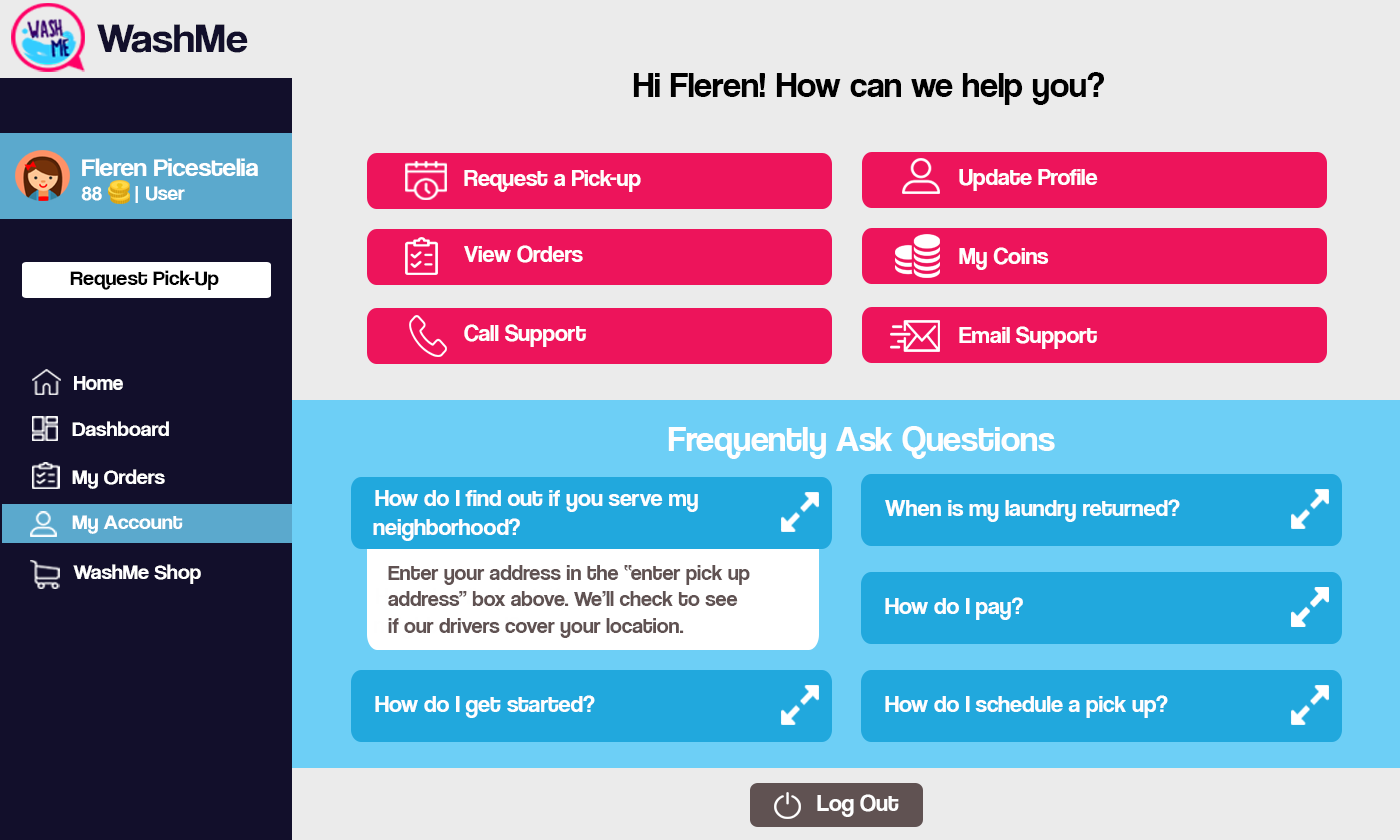
<style>
.page{position:relative;width:1400px;height:840px;background:#ebebeb}
.page>*{position:absolute;margin:0}
.t1{font:42.1px "CoolveticaRg-Regular";color:#120f2b;scale:1.05 1}
.t2{font:36px "CoolveticaRg-Regular";color:#000000}
.t3{font:25.2px "CoolveticaRg-Regular";color:#ffffff;scale:1.05 1}
.t4{font:20px "CoolveticaRg-Regular";color:#ffffff;scale:1.05 1}
.t5{font:24px "CoolveticaRg-Regular";color:#fefefe}
.t6{font:21px "CoolveticaRg-Regular";color:#000000;scale:1.05 1}
.t7{font:21px "CoolveticaRg-Regular";color:#ffffff}
.t8{font:21px "CoolveticaRg-Regular";color:#ffffff;scale:1.05 1}
.t9{font:36px "CoolveticaRg-Regular";color:#fefefe}
.t10{font:22px "CoolveticaRg-Regular";color:#605252}
</style>
<div class="page">
<p class="t1" style="left:97px;top:24px;width:151px;height:29px">WashMe</p>
<p class="t2" style="left:633px;top:72px;width:471px;height:33px">Hi Fleren! How can we help you?</p>
<p class="t3" style="left:81px;top:158px;width:177px;height:45px">Fleren Picestelia<br><span class="t4">88      | User</span></p>
<p class="t5" style="left:464px;top:170px;width:177px;height:22px">Request a Pick-up</p>
<p class="t5" style="left:959px;top:169px;width:139px;height:22px">Update Profile</p>
<p class="t5" style="left:464px;top:245px;width:119px;height:18px">View Orders</p>
<p class="t5" style="left:959px;top:247px;width:90px;height:23px">My Coins</p>
<p class="t6" style="left:70px;top:270px;width:149px;height:20px">Request Pick-Up</p>
<p class="t5" style="left:464px;top:324px;width:122px;height:23px">Call Support</p>
<p class="t5" style="left:959px;top:326px;width:138px;height:23px">Email Support</p>
<p class="t7" style="left:74px;top:376px;width:49px;height:14px">Home</p>
<p class="t8" style="left:72px;top:421px;width:97px;height:15px">Dashboard</p>
<p class="t9" style="left:668px;top:426px;width:387px;height:33px">Frequently Ask Questions</p>
<p class="t8" style="left:72px;top:469px;width:93px;height:20px">My Orders</p>
<p class="t5" style="left:373px;top:490px;width:325px;height:51px">How do I find out if you serve my <br> neighborhood?</p>
<p class="t5" style="left:885px;top:499px;width:295px;height:23px">When is my laundry returned?</p>
<p class="t8" style="left:72px;top:515px;width:111px;height:19px">My Account</p>
<p class="t8" style="left:73px;top:564px;width:128px;height:20px">WashMe Shop</p>
<p class="t10" style="left:388px;top:565px;width:362px;height:73px">Enter your address in the “enter pick up<br>address” box above. We’ll check to see<br>if our drivers cover your location.</p>
<p class="t5" style="left:885px;top:597px;width:138px;height:23px">How do I pay?</p>
<p class="t5" style="left:375px;top:695px;width:220px;height:23px">How do I get started?</p>
<p class="t5" style="left:885px;top:695px;width:283px;height:23px">How do I schedule a pick up?</p>
<p class="t5" style="left:817px;top:794px;width:82px;height:23px">Log Out</p>
</div>
